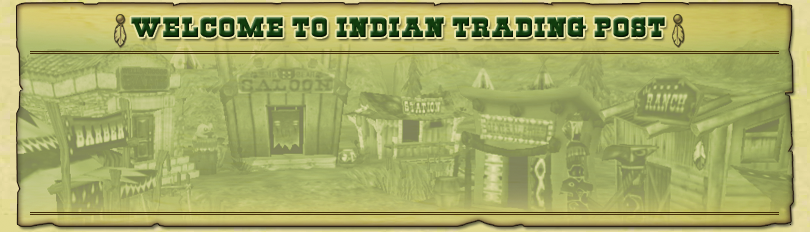
<style>
.page{position:relative;width:810px;height:232px}
.page>*{position:absolute;margin:0}
.t1{font:20.8px "Cowboys";letter-spacing:0.05em;color:#123b0d}
</style>
<div class="page">
<p class="t1" style="left:131px;top:17px;width:534px;height:21px">WELCOME TO INDIAN TRADING POST</p>
</div>
